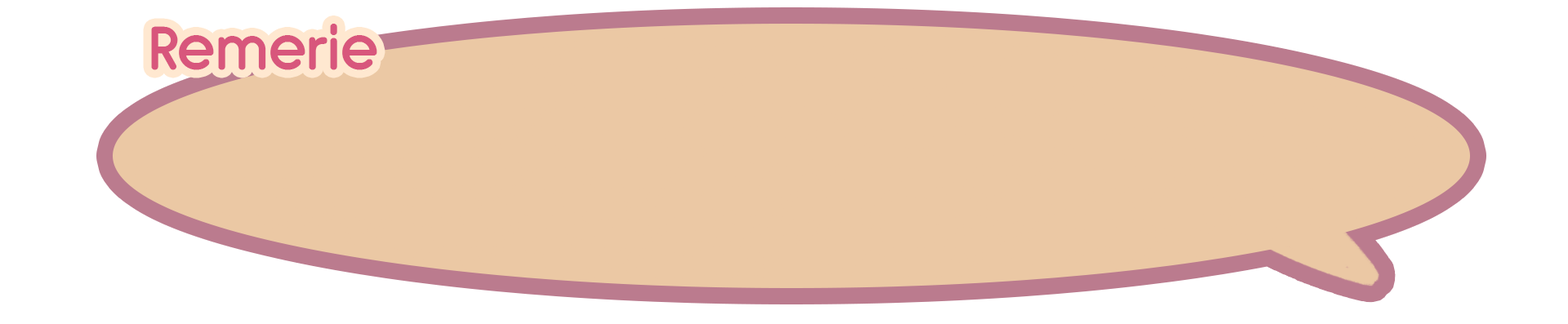
<style>
.page{position:relative;width:1568px;height:324px;background:#ebc8a4}
.page>*{position:absolute;margin:0}
.t1{font:58.8px "RimouskiSb-Regular";color:#d8567c}
</style>
<div class="page">
<p class="t1" style="left:151px;top:24px;width:226px;height:46px">Remerie</p>
</div>
